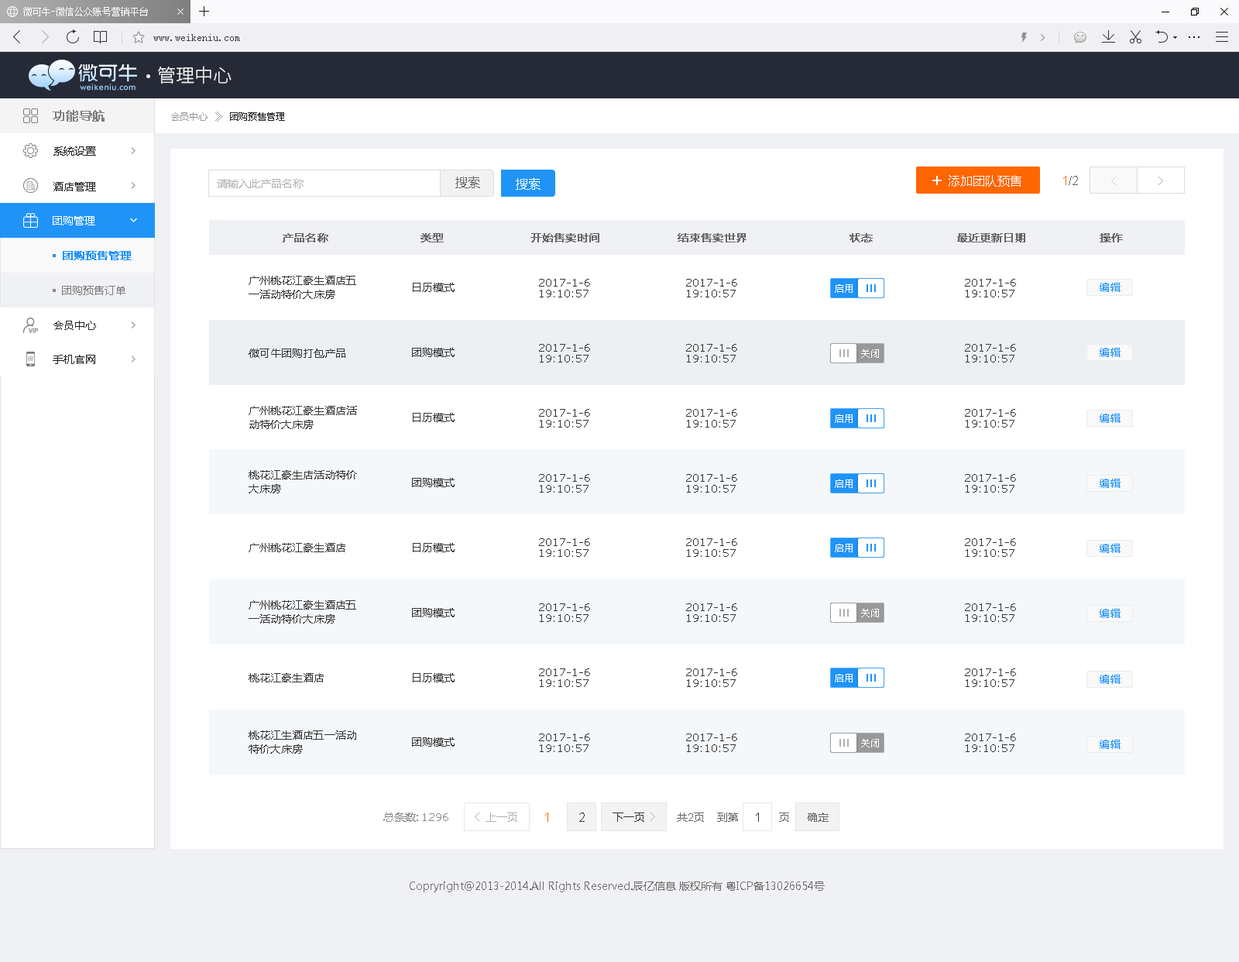
<style>
.page{position:relative;width:1239px;height:962px;background:#ffffff}
.page>*{position:absolute;margin:0}
.t1{font:18.6px "SourceHanSansCN-Light";color:#e1e1e1}
.t2{font:12.4px "MicrosoftYaHei";color:#7d7d7d;font-weight:bold}
.t3{font:9.3px "MicrosoftYaHei";color:#999999}
.t4{font:10.8px "SimSun";color:#999999}
.t5{font:9.3px "MicrosoftYaHei";color:#222222}
.t6{font:10.8px "MicrosoftYaHei";color:#222222}
.t7{font:10.8px "MicrosoftYaHei";color:#afafaf}
.t8{font:12.4px "MicrosoftYaHei";color:#666666}
.t9{font:12.4px "MicrosoftYaHei";color:#ffffff}
.t10{font:12.4px "ArialMT";color:#666666}
.t11{font:12.4px "ArialMT";color:#ff6600}
.t12{font:10.8px "MicrosoftYaHei";color:#ffffff}
.t13{font:10.8px "MicrosoftYaHei";color:#666666;font-weight:bold}
.t14{font:10.8px "MicrosoftYaHei";color:#2093f7;font-weight:bold}
.t15{font:10.8px/13.9px "MicrosoftYaHei";color:#333333}
.t16{font:10.8px/10.8px "Verdana";color:#333333}
.t17{font:10.8px "MicrosoftYaHei";color:#7d7d7d}
.t18{font:10.8px "MicrosoftYaHei";color:#333333}
.t19{font:10.8px "MicrosoftYaHei";color:#2093f7}
.t20{font:10.8px "MicrosoftYaHei";color:#888888}
.t21{font:10.8px "Verdana";color:#888888}
.t22{font:12.4px "ArialMT";color:#333333}
.t23{font:10.8px "MicrosoftYaHei";color:#666666}
.t24{font:10.8px "ArialMT";color:#666666}
.t25{font:10.8px "MicrosoftYaHei";color:#6f6f6f}
</style>
<div class="page">
<p class="t1" style="left:158px;top:66px;width:74px;height:18px">管理中心</p>
<p class="t2" style="left:53px;top:110px;width:52px;height:12px">功能导航</p>
<p class="t3" style="left:171px;top:112px;width:37px;height:9px">会员中心</p>
<p class="t4" style="left:215px;top:112px;width:7px;height:10px">》</p>
<p class="t5" style="left:230px;top:112px;width:55px;height:9px">团购预售管理</p>
<p class="t6" style="left:53px;top:146px;width:43px;height:10px">系统设置</p>
<p class="t6" style="left:53px;top:182px;width:43px;height:9px">酒店管理</p>
<p class="t7" style="left:217px;top:179px;width:87px;height:9px">请输入此产品名称</p>
<p class="t8" style="left:455px;top:176px;width:25px;height:12px">搜索</p>
<p class="t9" style="left:516px;top:177px;width:25px;height:13px">搜索</p>
<p class="t9" style="left:949px;top:175px;width:73px;height:12px">添加团队预售</p>
<p class="t10" style="left:1064px;top:176px;width:14px;height:9px"><span class="t11">1</span>/2</p>
<p class="t12" style="left:53px;top:216px;width:42px;height:9px">团购管理</p>
<p class="t13" style="left:283px;top:233px;width:45px;height:9px">产品名称</p>
<p class="t13" style="left:421px;top:233px;width:23px;height:9px">类型</p>
<p class="t13" style="left:531px;top:233px;width:69px;height:9px">开始售卖时间</p>
<p class="t13" style="left:678px;top:233px;width:69px;height:9px">结束售卖世界</p>
<p class="t13" style="left:850px;top:233px;width:23px;height:9px">状态</p>
<p class="t13" style="left:957px;top:233px;width:69px;height:9px">最近更新日期</p>
<p class="t13" style="left:1100px;top:233px;width:23px;height:9px">操作</p>
<p class="t14" style="left:63px;top:251px;width:69px;height:9px">团购预售管理</p>
<p class="t15" style="left:249px;top:276px;width:107px;height:23px">广州桃花江豪生酒店五<br>一活动特价大床房</p>
<p class="t16" style="left:539px;top:279px;width:51px;height:18px">2017-1-6 <br>19:10:57</p>
<p class="t16" style="left:686px;top:279px;width:51px;height:18px">2017-1-6 <br>19:10:57</p>
<p class="t16" style="left:965px;top:279px;width:51px;height:18px">2017-1-6 <br>19:10:57</p>
<p class="t17" style="left:62px;top:286px;width:63px;height:9px">团购预售订单</p>
<p class="t18" style="left:413px;top:283px;width:42px;height:9px">日历模式</p>
<p class="t19" style="left:1100px;top:283px;width:21px;height:9px">编辑</p>
<p class="t6" style="left:53px;top:321px;width:43px;height:9px">会员中心</p>
<p class="t18" style="left:249px;top:349px;width:96px;height:9px">微可牛团购打包产品</p>
<p class="t18" style="left:412px;top:348px;width:43px;height:9px">团购模式</p>
<p class="t16" style="left:539px;top:344px;width:51px;height:19px">2017-1-6 <br>19:10:57</p>
<p class="t16" style="left:686px;top:344px;width:51px;height:19px">2017-1-6 <br>19:10:57</p>
<p class="t16" style="left:965px;top:344px;width:51px;height:19px">2017-1-6 <br>19:10:57</p>
<p class="t19" style="left:1100px;top:348px;width:21px;height:9px">编辑</p>
<p class="t6" style="left:53px;top:355px;width:42px;height:9px">手机官网</p>
<p class="t15" style="left:249px;top:406px;width:108px;height:23px">广州桃花江豪生酒店活<br>动特价大床房</p>
<p class="t18" style="left:413px;top:413px;width:42px;height:9px">日历模式</p>
<p class="t16" style="left:539px;top:409px;width:51px;height:19px">2017-1-6 <br>19:10:57</p>
<p class="t16" style="left:686px;top:409px;width:51px;height:19px">2017-1-6 <br>19:10:57</p>
<p class="t16" style="left:965px;top:409px;width:51px;height:19px">2017-1-6 <br>19:10:57</p>
<p class="t19" style="left:1100px;top:414px;width:21px;height:9px">编辑</p>
<p class="t15" style="left:249px;top:470px;width:108px;height:23px">桃花江豪生店活动特价<br>大床房</p>
<p class="t18" style="left:412px;top:478px;width:43px;height:9px">团购模式</p>
<p class="t16" style="left:539px;top:474px;width:51px;height:19px">2017-1-6 <br>19:10:57</p>
<p class="t16" style="left:686px;top:474px;width:51px;height:19px">2017-1-6 <br>19:10:57</p>
<p class="t16" style="left:965px;top:474px;width:51px;height:19px">2017-1-6 <br>19:10:57</p>
<p class="t19" style="left:1100px;top:479px;width:21px;height:9px">编辑</p>
<p class="t18" style="left:249px;top:543px;width:96px;height:9px">广州桃花江豪生酒店</p>
<p class="t18" style="left:413px;top:543px;width:42px;height:9px">日历模式</p>
<p class="t16" style="left:539px;top:538px;width:51px;height:19px">2017-1-6 <br>19:10:57</p>
<p class="t16" style="left:686px;top:538px;width:51px;height:19px">2017-1-6 <br>19:10:57</p>
<p class="t16" style="left:965px;top:538px;width:51px;height:19px">2017-1-6 <br>19:10:57</p>
<p class="t19" style="left:1100px;top:544px;width:21px;height:9px">编辑</p>
<p class="t15" style="left:249px;top:600px;width:107px;height:24px">广州桃花江豪生酒店五<br>一活动特价大床房</p>
<p class="t16" style="left:539px;top:603px;width:51px;height:19px">2017-1-6 <br>19:10:57</p>
<p class="t16" style="left:686px;top:603px;width:51px;height:19px">2017-1-6 <br>19:10:57</p>
<p class="t16" style="left:965px;top:603px;width:51px;height:19px">2017-1-6 <br>19:10:57</p>
<p class="t18" style="left:412px;top:608px;width:43px;height:9px">团购模式</p>
<p class="t19" style="left:1100px;top:609px;width:21px;height:9px">编辑</p>
<p class="t18" style="left:249px;top:673px;width:75px;height:9px">桃花江豪生酒店</p>
<p class="t18" style="left:413px;top:673px;width:42px;height:9px">日历模式</p>
<p class="t16" style="left:539px;top:669px;width:51px;height:18px">2017-1-6 <br>19:10:57</p>
<p class="t16" style="left:686px;top:669px;width:51px;height:18px">2017-1-6 <br>19:10:57</p>
<p class="t16" style="left:965px;top:669px;width:51px;height:18px">2017-1-6 <br>19:10:57</p>
<p class="t19" style="left:1100px;top:675px;width:21px;height:9px">编辑</p>
<p class="t15" style="left:249px;top:730px;width:107px;height:24px">桃花江生酒店五一活动<br>特价大床房</p>
<p class="t18" style="left:412px;top:737px;width:43px;height:10px">团购模式</p>
<p class="t16" style="left:539px;top:734px;width:51px;height:18px">2017-1-6 <br>19:10:57</p>
<p class="t16" style="left:686px;top:734px;width:51px;height:18px">2017-1-6 <br>19:10:57</p>
<p class="t16" style="left:965px;top:734px;width:51px;height:18px">2017-1-6 <br>19:10:57</p>
<p class="t19" style="left:1100px;top:740px;width:21px;height:9px">编辑</p>
<p class="t20" style="left:383px;top:813px;width:66px;height:9px">总条数: <span class="t21">1296</span></p>
<p class="t7" style="left:486px;top:813px;width:31px;height:9px">上一页</p>
<p class="t11" style="left:545px;top:813px;width:3px;height:9px">1</p>
<p class="t22" style="left:579px;top:813px;width:6px;height:9px">2</p>
<p class="t18" style="left:613px;top:813px;width:31px;height:9px">下一页</p>
<p class="t23" style="left:677px;top:813px;width:112px;height:9px">共<span class="t24">2</span>页    到第             页</p>
<p class="t22" style="left:756px;top:813px;width:3px;height:9px">1</p>
<p class="t23" style="left:807px;top:813px;width:22px;height:9px">确定</p>
<p class="t25" style="left:410px;top:882px;width:415px;height:10px">Copryright@2013-2014.All Rights Reserved.辰亿信息 版权所有 粤ICP备13026654号</p>
</div>
